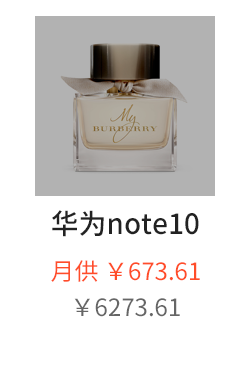
<style>
.page{position:relative;width:250px;height:366px;background:#ffffff}
.page>*{position:absolute;margin:0}
.t1{font:28px "SourceHanSansCN-Medium";color:#222222}
.t2{font:24px "SourceHanSansCN-Regular";color:#ff4d29}
.t3{font:24px "SourceHanSansCN-Regular";color:#666666}
</style>
<div class="page">
<p class="t1" style="left:52px;top:210px;width:147px;height:27px">华为note10</p>
<p class="t2" style="left:51px;top:260px;width:149px;height:22px">月供 ￥673.61</p>
<p class="t3" style="left:74px;top:298px;width:106px;height:19px">￥6273.61</p>
</div>
